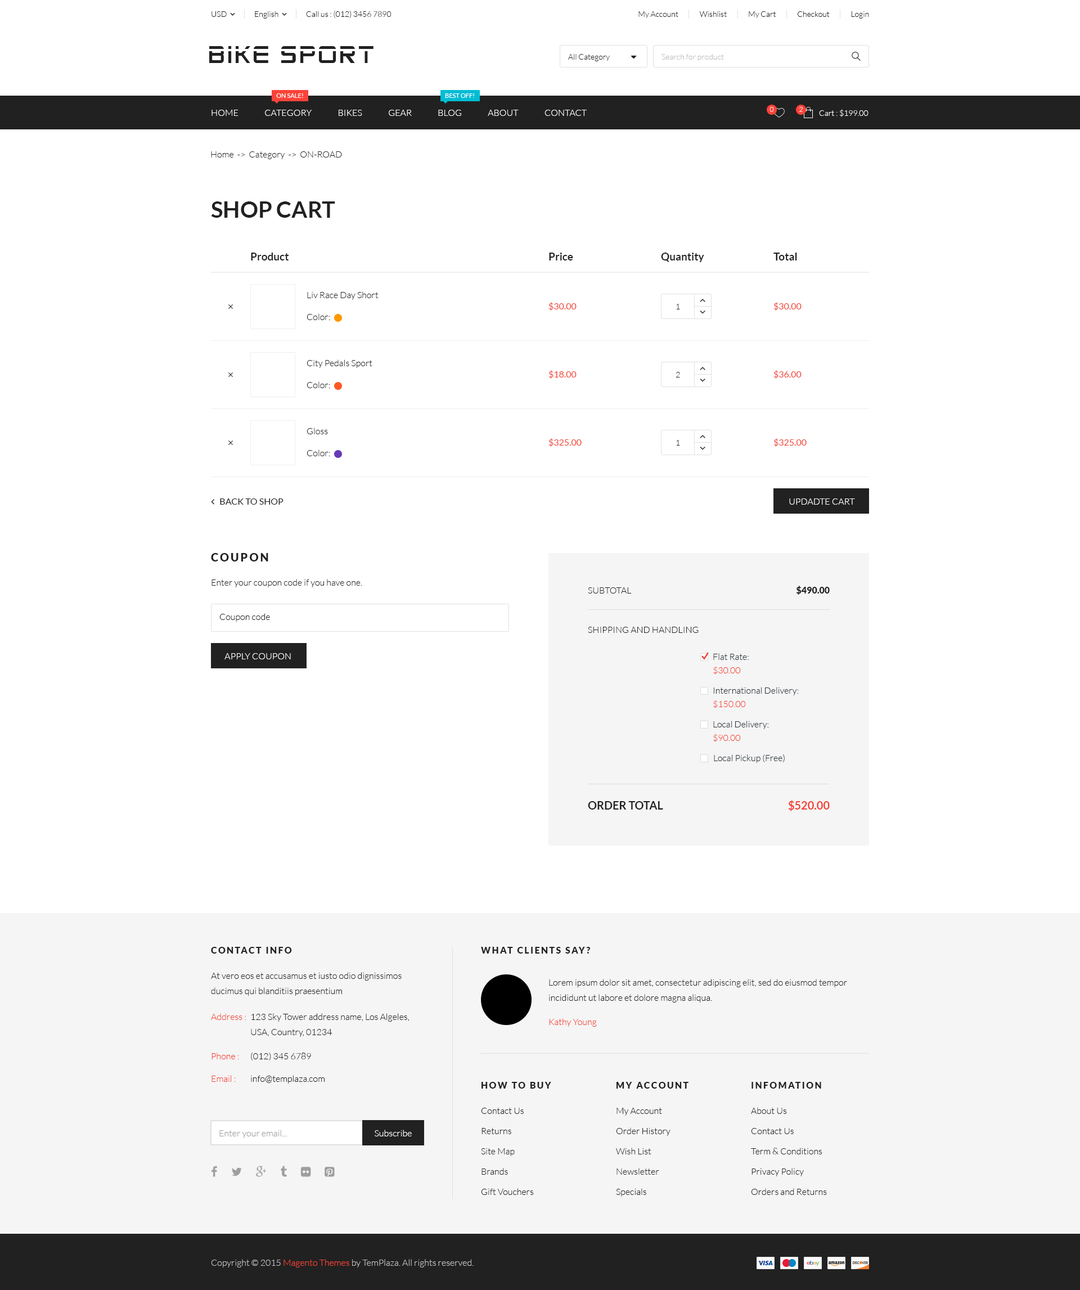
<style>
.page{position:relative;width:1080px;height:1290px;background:#ffffff}
.page>*{position:absolute;margin:0}
.t1{font:7.9px "Lato-Light";color:#212121}
.t2{font:24.2px "AdventureSubtitlesNormal";letter-spacing:0.1em;color:#212121;text-transform:uppercase}
.t3{font:24.2px "AdventureSubtitlesNormal";letter-spacing:0.1em;color:#212121}
.t4{font:7.9px "Lato-Light";color:#bdbdbd}
.t5{font:6.2px "Lato-Regular";color:#ffffff;text-transform:uppercase}
.t6{font:9px "Lato-Light";color:#ffffff;text-transform:uppercase}
.t7{font:6.7px "Lato-Light"}
.t8{font:7.9px "Lato-Light";color:#ffffff}
.t9{font:9px "Lato-Light";color:#212121}
.t10{font:22.5px "Lato-Bold";color:#212121;text-transform:uppercase}
.t11{font:10.7px "Lato-Bold";color:#212121}
.t12{font:9px "Lato-Regular";color:#f44336}
.t13{font:9px "Lato-Regular";color:#212121;text-transform:uppercase}
.t14{font:11.2px "Lato-Black";letter-spacing:0.15em;color:#212121;text-transform:uppercase}
.t15{font:9px "Lato-Light";color:#212121;text-transform:uppercase}
.t16{font:9px "Lato-Black";color:#212121;text-transform:uppercase}
.t17{font:9px "Lato-Light";color:#263238}
.t18{font:9px "Lato-Light";color:#f44336}
.t19{font:11.2px "Lato-Bold";color:#212121;text-transform:uppercase}
.t20{font:11.2px "Lato-Bold";color:#f44336;text-transform:uppercase}
.t21{font:9px "Lato-Black";letter-spacing:0.15em;color:#212121}
.t22{font:9px "Lato-Black";letter-spacing:0.15em;color:#212121;text-transform:uppercase}
.t23{font:9px/15.2px "Lato-Light";color:#212121}
.t24{font:9px/20.2px "Lato-Light";color:#212121}
.t25{font:9px "Lato-Light";color:#9e9e9e}
.t26{font:9px "Lato-Light";color:#ffffff}
.t27{font:9px "Lato-Light";color:#bdbdbd}
</style>
<div class="page">
<p class="t1" style="left:212px;top:11px;width:15px;height:6px">USD</p>
<p class="t1" style="left:255px;top:11px;width:23px;height:8px">English</p>
<p class="t1" style="left:306px;top:11px;width:86px;height:7px">Call us : (012) 3456 7890</p>
<p class="t1" style="left:638px;top:11px;width:231px;height:8px">My Account              Wishlist              My Cart              Checkout              Login</p>
<p class="t2" style="left:209px;top:46px;width:165px;height:17px">b<span class="t3">l</span>ke sport</p>
<p class="t1" style="left:568px;top:54px;width:42px;height:7px">All Category</p>
<p class="t4" style="left:662px;top:54px;width:62px;height:7px">Search for product</p>
<p class="t5" style="left:276px;top:93px;width:27px;height:5px">On sale!</p>
<p class="t5" style="left:445px;top:93px;width:29px;height:5px">Best off!</p>
<p class="t6" style="left:212px;top:110px;width:375px;height:6px">Home               category               Bikes               Gear               Blog               About               Contact</p>
<p class="t7" style="left:770px;top:107px;width:4px;height:5px">0</p>
<p class="t7" style="left:799px;top:107px;width:4px;height:5px">2</p>
<p class="t8" style="left:819px;top:109px;width:49px;height:8px">Cart : $199.00</p>
<p class="t9" style="left:211px;top:151px;width:131px;height:8px">Home  -&gt;  Category  -&gt;  ON-ROAD</p>
<p class="t10" style="left:211px;top:201px;width:124px;height:17px">Shop Cart</p>
<p class="t11" style="left:251px;top:253px;width:38px;height:7px">Product</p>
<p class="t11" style="left:549px;top:253px;width:24px;height:7px">Price</p>
<p class="t11" style="left:661px;top:253px;width:43px;height:9px">Quantity</p>
<p class="t11" style="left:773px;top:253px;width:24px;height:7px">Total</p>
<p class="t9" style="left:307px;top:291px;width:72px;height:9px">Liv Race Day Short</p>
<p class="t12" style="left:549px;top:302px;width:28px;height:8px">$30.00</p>
<p class="t1" style="left:676px;top:304px;width:4px;height:5px">1</p>
<p class="t12" style="left:774px;top:302px;width:28px;height:8px">$30.00</p>
<p class="t9" style="left:307px;top:313px;width:23px;height:7px">Color:</p>
<p class="t9" style="left:307px;top:359px;width:65px;height:9px">City Pedals Sport</p>
<p class="t12" style="left:549px;top:370px;width:28px;height:9px">$18.00</p>
<p class="t1" style="left:676px;top:372px;width:4px;height:5px">2</p>
<p class="t12" style="left:774px;top:370px;width:28px;height:9px">$36.00</p>
<p class="t9" style="left:307px;top:381px;width:23px;height:7px">Color:</p>
<p class="t9" style="left:307px;top:428px;width:21px;height:6px">Gloss</p>
<p class="t9" style="left:307px;top:449px;width:23px;height:7px">Color:</p>
<p class="t12" style="left:549px;top:438px;width:33px;height:9px">$325.00</p>
<p class="t1" style="left:676px;top:440px;width:4px;height:6px">1</p>
<p class="t12" style="left:774px;top:438px;width:33px;height:9px">$325.00</p>
<p class="t13" style="left:220px;top:498px;width:64px;height:7px">Back to Shop</p>
<p class="t6" style="left:789px;top:498px;width:66px;height:7px">Updadte cart</p>
<p class="t14" style="left:211px;top:553px;width:57px;height:8px">Coupon</p>
<p class="t9" style="left:212px;top:579px;width:150px;height:8px">Enter your coupon code if you have one.</p>
<p class="t15" style="left:588px;top:587px;width:44px;height:6px">Subtotal</p>
<p class="t16" style="left:796px;top:586px;width:34px;height:9px">$490.00</p>
<p class="t9" style="left:219px;top:613px;width:51px;height:9px">Coupon code</p>
<p class="t15" style="left:588px;top:627px;width:111px;height:6px">Shipping and handling</p>
<p class="t6" style="left:224px;top:653px;width:67px;height:6px">Apply Coupon</p>
<p class="t17" style="left:713px;top:653px;width:36px;height:7px">Flat Rate:</p>
<p class="t18" style="left:713px;top:666px;width:28px;height:8px">$30.00</p>
<p class="t17" style="left:713px;top:687px;width:86px;height:8px">International Delivery:</p>
<p class="t18" style="left:713px;top:700px;width:33px;height:8px">$150.00</p>
<p class="t17" style="left:713px;top:721px;width:56px;height:8px">Local Delivery:</p>
<p class="t18" style="left:713px;top:734px;width:28px;height:8px">$90.00</p>
<p class="t17" style="left:714px;top:754px;width:71px;height:9px">Local Pickup (Free)</p>
<p class="t19" style="left:588px;top:801px;width:75px;height:8px">Order total</p>
<p class="t20" style="left:788px;top:800px;width:42px;height:11px">$520.00</p>
<p class="t21" style="left:211px;top:947px;width:81px;height:6px">CONTACT INFO</p>
<p class="t22" style="left:481px;top:947px;width:109px;height:6px">What clients say?</p>
<p class="t23" style="left:211px;top:972px;width:191px;height:24px">At vero eos et accusamus et iusto odio dignissimos ducimus qui blanditiis praesentium</p>
<p class="t23" style="left:549px;top:979px;width:298px;height:23px">Lorem ipsum dolor sit amet, consectetur adipiscing elit, sed do eiusmod tempor     incididunt ut labore et dolore magna aliqua.</p>
<p class="t18" style="left:211px;top:1013px;width:35px;height:7px">Address :</p>
<p class="t23" style="left:251px;top:1013px;width:159px;height:24px">123 Sky Tower address name, Los Algeles,        USA, Country, 01234</p>
<p class="t18" style="left:549px;top:1018px;width:48px;height:9px">Kathy Young</p>
<p class="t18" style="left:212px;top:1052px;width:27px;height:7px">Phone :</p>
<p class="t9" style="left:251px;top:1052px;width:60px;height:8px">(012) 345 6789</p>
<p class="t18" style="left:212px;top:1075px;width:24px;height:7px">Email :</p>
<p class="t9" style="left:251px;top:1075px;width:74px;height:8px">info@templaza.com</p>
<p class="t21" style="left:482px;top:1082px;width:69px;height:6px">HOW TO BUY</p>
<p class="t21" style="left:616px;top:1082px;width:72px;height:6px">MY ACCOUNT</p>
<p class="t22" style="left:752px;top:1082px;width:69px;height:6px">Infomation</p>
<p class="t24" style="left:481px;top:1108px;width:53px;height:87px">Contact Us<br>Returns<br>Site Map<br>Brands<br>Gift Vouchers</p>
<p class="t24" style="left:616px;top:1108px;width:54px;height:88px">My Account<br>Order History<br>Wish List<br>Newsletter<br>Specials</p>
<p class="t24" style="left:751px;top:1107px;width:76px;height:88px">About Us<br>Contact Us<br>Term &amp; Conditions<br>Privacy Policy<br>Orders and Returns</p>
<p class="t25" style="left:219px;top:1130px;width:68px;height:8px">Enter your email...</p>
<p class="t26" style="left:375px;top:1130px;width:37px;height:6px">Subscribe</p>
<p class="t27" style="left:211px;top:1259px;width:263px;height:8px">Copyright © 2015 <span class="t18">Magento Themes</span> by TemPlaza. All rights reserved.</p>
</div>
